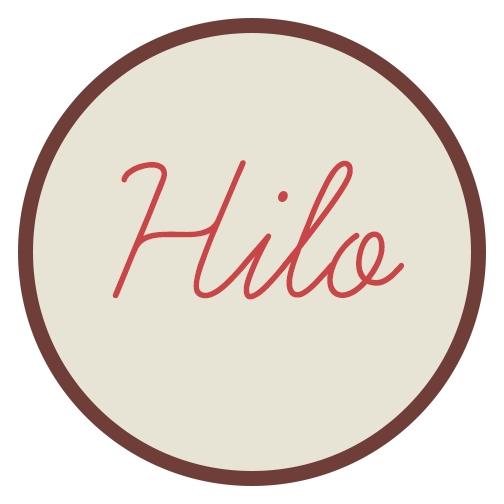
<style>
.page{position:relative;width:504px;height:504px;background:#e7e4d5}
.page>*{position:absolute;margin:0}
.t1{font:240px "LearningCurvePro";color:#c84648}
</style>
<div class="page">
<p class="t1" style="left:112px;top:160px;width:292px;height:140px">Hilo</p>
</div>
